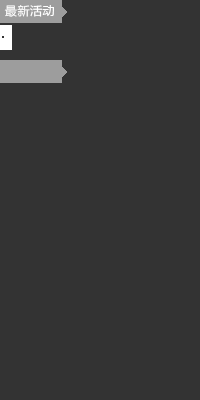
<style>
.page{position:relative;width:200px;height:400px;background:#333333}
.page>*{position:absolute;margin:0}
.t1{font:12px "MicrosoftYaHei";letter-spacing:0.05em;color:#ffffff}
</style>
<div class="page">
<p class="t1" style="left:4px;top:5px;width:50px;height:12px">最新活动</p>
</div>
